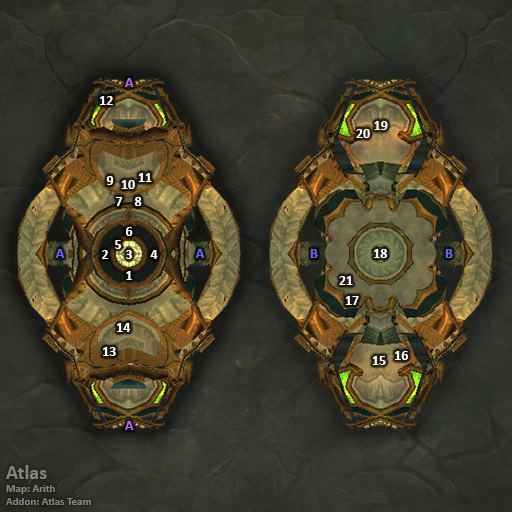
<style>
.page{position:relative;width:512px;height:512px}
.page>*{position:absolute;margin:0}
.t1{font:14px "Calibri-Bold";color:#bb66ff}
.t2{font:14px "Calibri-Bold";color:#ffffff}
.t3{font:14px "Calibri-Bold";color:#6666ff}
.t4{font:11px "Calibri-Bold";color:#838381}
.t5{font:20px "Calibri-Bold";color:#838381}
</style>
<div class="page">
<p class="t1" style="left:125px;top:78px;width:9px;height:9px">A</p>
<p class="t2" style="left:100px;top:96px;width:13px;height:9px">12</p>
<p class="t2" style="left:374px;top:121px;width:14px;height:9px">19</p>
<p class="t2" style="left:356px;top:129px;width:14px;height:9px">20</p>
<p class="t2" style="left:138px;top:173px;width:14px;height:9px">11</p>
<p class="t2" style="left:106px;top:176px;width:8px;height:9px">9</p>
<p class="t2" style="left:121px;top:180px;width:14px;height:9px">10</p>
<p class="t2" style="left:115px;top:197px;width:8px;height:9px">7</p>
<p class="t2" style="left:134px;top:197px;width:8px;height:9px">8</p>
<p class="t2" style="left:126px;top:227px;width:7px;height:9px">6</p>
<p class="t2" style="left:115px;top:240px;width:6px;height:9px">5</p>
<p class="t3" style="left:55px;top:249px;width:9px;height:9px">A</p>
<p class="t2" style="left:102px;top:250px;width:7px;height:9px">2</p>
<p class="t2" style="left:126px;top:250px;width:6px;height:9px">3</p>
<p class="t2" style="left:150px;top:250px;width:8px;height:9px">4</p>
<p class="t3" style="left:195px;top:249px;width:9px;height:9px">A</p>
<p class="t3" style="left:310px;top:249px;width:8px;height:9px">B</p>
<p class="t2" style="left:374px;top:249px;width:13px;height:9px">18</p>
<p class="t3" style="left:445px;top:249px;width:8px;height:9px">B</p>
<p class="t2" style="left:126px;top:271px;width:6px;height:9px">1</p>
<p class="t2" style="left:339px;top:276px;width:14px;height:9px">21</p>
<p class="t2" style="left:345px;top:296px;width:14px;height:9px">17</p>
<p class="t2" style="left:117px;top:323px;width:14px;height:9px">14</p>
<p class="t2" style="left:103px;top:347px;width:13px;height:9px">13</p>
<p class="t2" style="left:395px;top:351px;width:13px;height:9px">16</p>
<p class="t2" style="left:372px;top:356px;width:14px;height:9px">15</p>
<p class="t1" style="left:125px;top:421px;width:9px;height:9px">A</p>
<p class="t4" style="left:6px;top:465px;width:85px;height:40px"><span class="t5">Atlas<br></span>Map: Arith<br>Addon: Atlas Team</p>
</div>
